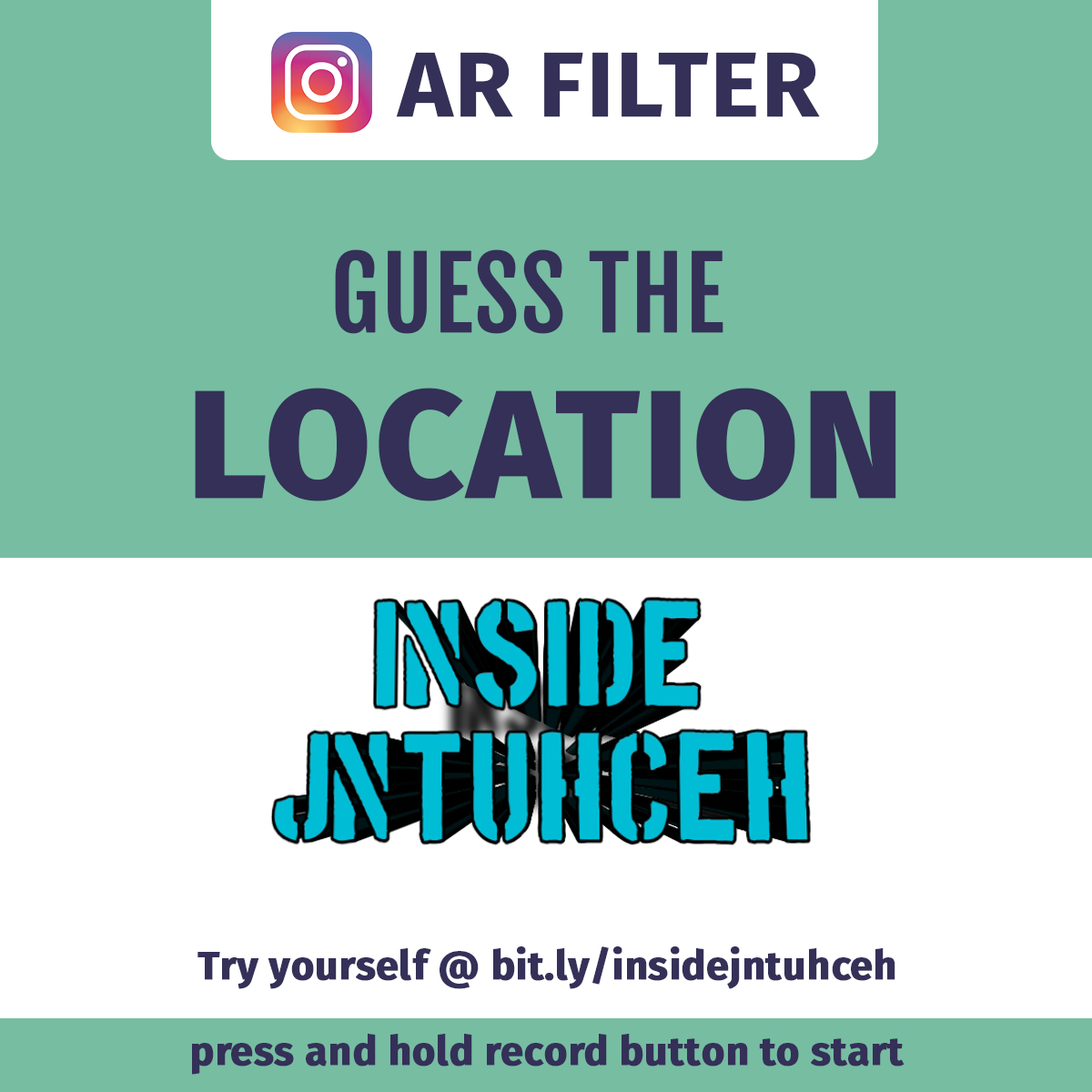
<style>
.page{position:relative;width:1092px;height:1092px;background:#77bda2}
.page>*{position:absolute;margin:0}
.t1{font:92.4px "FiraSans-Bold";color:#343058;font-weight:bold}
.t2{font:96.6px "FjallaOne";color:#343058;font-weight:bold}
.t3{font:153.3px "FiraSans-ExtraBold";color:#343058;font-weight:bold}
.t4{font:40px "FiraSans-Bold";color:#343058;font-weight:bold}
</style>
<div class="page">
<p class="t1" style="left:396px;top:52px;width:424px;height:65px">AR FILTER</p>
<p class="t2" style="left:335px;top:249px;width:388px;height:85px">GUESS THE</p>
<p class="t3" style="left:195px;top:388px;width:701px;height:113px">LOCATION</p>
<p class="t4" style="left:197px;top:946px;width:698px;height:43px">Try yourself @ bit.ly/insidejntuhceh</p>
<p class="t4" style="left:192px;top:1034px;width:713px;height:41px">press and hold record button to start</p>
</div>
